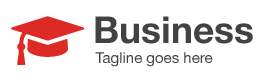
<style>
.page{position:relative;width:263px;height:82px;background:#ffffff}
.page>*{position:absolute;margin:0}
.t1{font:37px "HelveticaNeue-Bold";color:#424242}
.t2{font:15px "HelveticaNeue";color:#424242}
</style>
<div class="page">
<p class="t1" style="left:95px;top:16px;width:158px;height:28px">Business</p>
<p class="t2" style="left:95px;top:52px;width:118px;height:15px">Tagline goes here</p>
</div>
